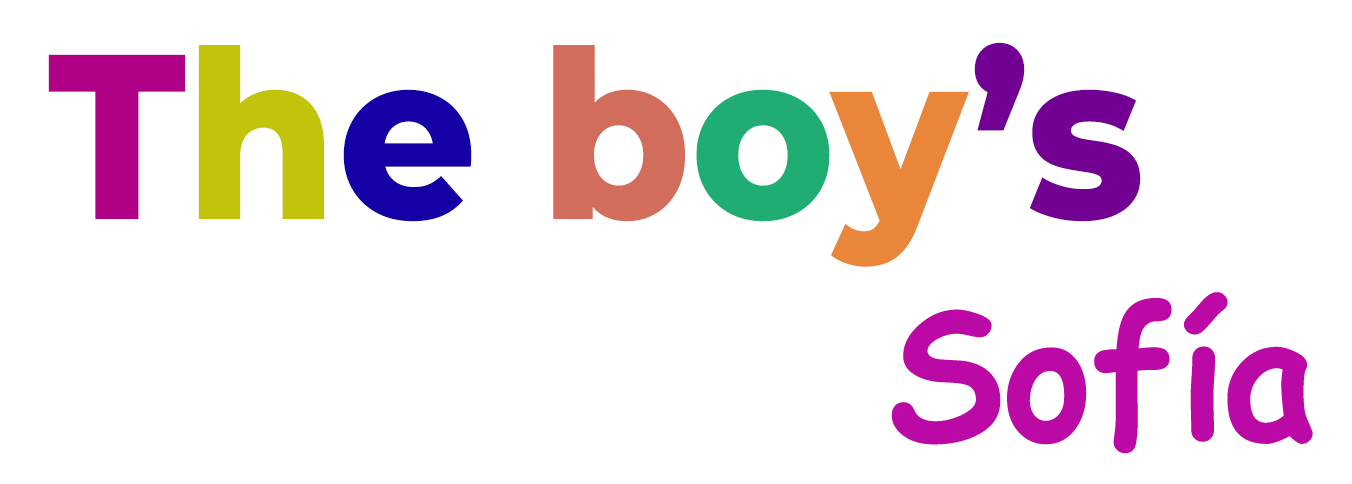
<style>
.page{position:relative;width:1352px;height:484px;background:#ffffff}
.page>*{position:absolute;margin:0}
.t1{font:234.4px "Montserrat-ExtraBold";color:#720093;scale:0.92 1}
.t2{font:234.4px "Montserrat-ExtraBold";color:#b00086;scale:0.92 1}
.t3{font:234.4px "Montserrat-ExtraBold";color:#c2c40b;scale:0.92 1}
.t4{font:234.4px "Montserrat-ExtraBold";color:#1400a4;scale:0.92 1}
.t5{font:234.4px "Montserrat-ExtraBold";color:#d26d5b;scale:0.92 1}
.t6{font:234.4px "Montserrat-ExtraBold";color:#1fad73;scale:0.92 1}
.t7{font:234.4px "Montserrat-ExtraBold";color:#ea863a;scale:0.92 1}
.t8{font:180.4px "ComicSansMS-Bold";color:#bb09a5;scale:0.92 1}
</style>
<div class="page">
<p class="t1" style="left:48px;top:42px;width:1093px;height:225px"><span class="t2">T</span><span class="t3">h</span><span class="t4">e </span><span class="t5">b</span><span class="t6">o</span><span class="t7">y</span>’s</p>
<p class="t8" style="left:891px;top:292px;width:422px;height:162px">Sofía</p>
</div>
